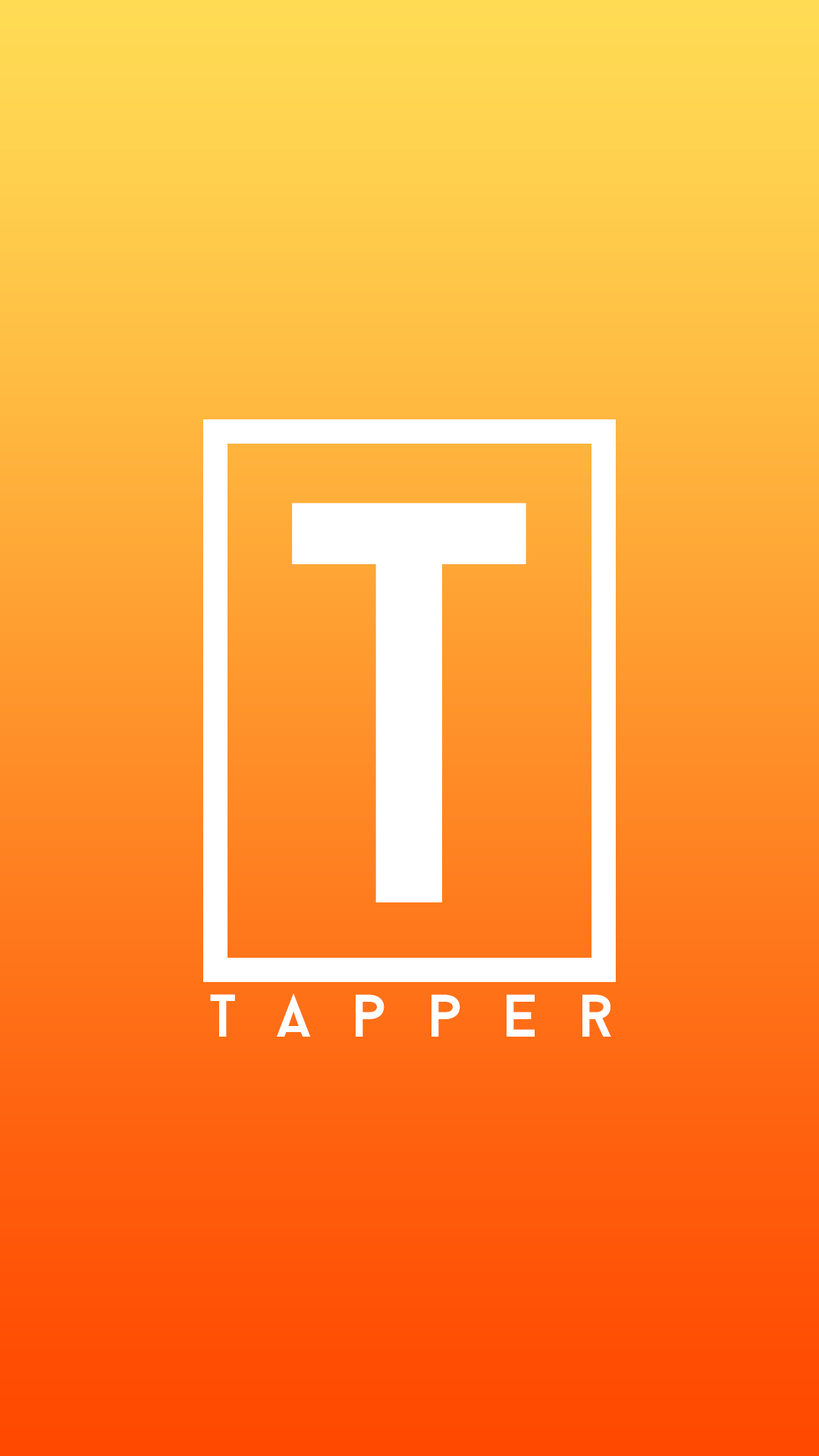
<style>
.page{position:relative;width:819px;height:1456px}
.page>*{position:absolute;margin:0}
.t1{font:570.3px "BaronNeue";color:#ffffff}
.t2{font:59.9px "BaronNeue";letter-spacing:0.68em;color:#ffffff}
</style>
<div class="page">
<p class="t1" style="left:292px;top:503px;width:234px;height:399px">T</p>
<p class="t2" style="left:210px;top:993px;width:401px;height:44px">Tapper</p>
</div>
